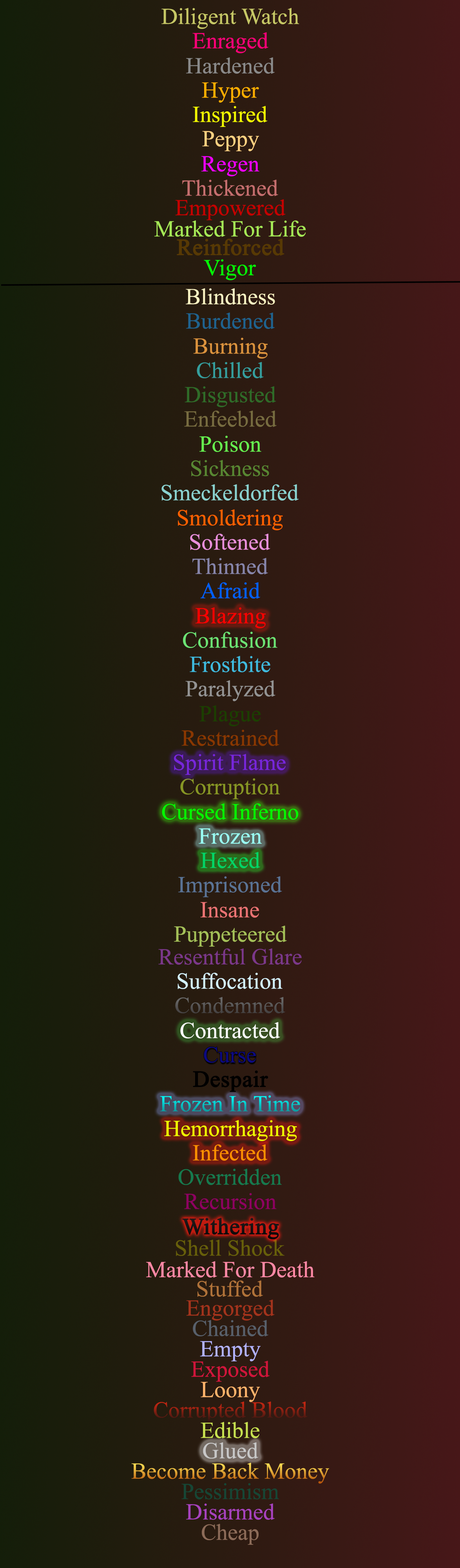
<style>
.page{position:relative;width:460px;height:1568px}
.page>*{position:absolute;margin:0}
.t1{font:39.2px "TimesNewRomanPSMT";color:#c6c765}
.t2{font:39.2px "TimesNewRomanPSMT";color:#ff0078}
.t3{font:39.2px "TimesNewRomanPSMT";color:#8a8a8a}
.t4{font:39.2px "TimesNewRomanPSMT";color:#ffae00}
.t5{font:39.2px "TimesNewRomanPSMT";color:#f3fc00}
.t6{font:39.2px "TimesNewRomanPSMT";color:#fed181}
.t7{font:39.2px "TimesNewRomanPSMT";color:#f000ff}
.t8{font:39.2px "TimesNewRomanPSMT";color:#c56e6e}
.t9{font:39.2px "TimesNewRomanPSMT";color:#c50000}
.t10{font:39.2px "TimesNewRomanPSMT";color:#a5e856}
.t11{font:39.2px "TimesNewRomanPSMT";color:#573904;font-weight:bold}
.t12{font:39.2px "TimesNewRomanPSMT";color:#00ff06}
.t13{font:39.2px "TimesNewRomanPSMT";color:#f9f2c2}
.t14{font:39.2px "TimesNewRomanPSMT";color:#1f638f}
.t15{font:39.2px "TimesNewRomanPSMT";color:#db923d}
.t16{font:39.2px "TimesNewRomanPSMT";color:#359e9d}
.t17{font:39.2px "TimesNewRomanPSMT";color:#2f6b28}
.t18{font:39.2px "TimesNewRomanPSMT";color:#776c40}
.t19{font:39.2px "TimesNewRomanPSMT";color:#66f24f}
.t20{font:39.2px "TimesNewRomanPSMT";color:#588732}
.t21{font:39.2px "TimesNewRomanPSMT";color:#8ad2cf}
.t22{font:39.2px "TimesNewRomanPSMT";color:#ff6000}
.t23{font:39.2px "TimesNewRomanPSMT";color:#e98fdb}
.t24{font:39.2px "TimesNewRomanPSMT";color:#8785aa}
.t25{font:39.2px "TimesNewRomanPSMT";color:#0060ff}
.t26{font:39.2px "TimesNewRomanPSMT";color:#ff0000}
.t27{font:39.2px "TimesNewRomanPSMT";color:#6ce374}
.t28{font:39.2px "TimesNewRomanPSMT";color:#3fbbdf}
.t29{font:39.2px "TimesNewRomanPSMT";color:#939393}
.t30{font:39.2px "TimesNewRomanPSMT";color:#1b3f00}
.t31{font:39.2px "TimesNewRomanPSMT";color:#893700}
.t32{font:39.2px "TimesNewRomanPSMT";color:#7726db}
.t33{font:39.2px "TimesNewRomanPSMT";color:#879624}
.t34{font:39.2px "TimesNewRomanPSMT";color:#00ff00}
.t35{font:39.2px "TimesNewRomanPSMT";color:#9afff4}
.t36{font:39.2px "TimesNewRomanPSMT";color:#01d565}
.t37{font:39.2px "TimesNewRomanPSMT";color:#5a7395}
.t38{font:39.2px "TimesNewRomanPSMT";color:#eb7373}
.t39{font:39.2px "TimesNewRomanPSMT";color:#a4c058}
.t40{font:39.2px "TimesNewRomanPSMT";color:#7b388a}
.t41{font:39.2px "TimesNewRomanPSMT";color:#d4f2ff}
.t42{font:39.2px "TimesNewRomanPSMT";color:#535151}
.t43{font:39.2px "TimesNewRomanPSMT";color:#ffffff}
.t44{font:39.2px "TimesNewRomanPSMT";color:#0d0a80}
.t45{font:39.2px "TimesNewRomanPSMT";color:#000000;font-weight:bold}
.t46{font:39.2px "TimesNewRomanPSMT"}
.t47{font:39.2px "TimesNewRomanPSMT";color:#f0ff00}
.t48{font:39.2px "TimesNewRomanPSMT";color:#ff9000}
.t49{font:39.2px "TimesNewRomanPSMT";color:#167a4e}
.t50{font:39.2px "TimesNewRomanPSMT";color:#8e0061}
.t51{font:39.2px "TimesNewRomanPSMT";color:#675f0a}
.t52{font:39.2px "TimesNewRomanPSMT";color:#ff88a5}
.t53{font:39.2px "TimesNewRomanPSMT";color:#b07239}
.t54{font:39.2px "TimesNewRomanPSMT";color:#a3331c}
.t55{font:39.2px "TimesNewRomanPSMT";color:#58606b}
.t56{font:39.2px "TimesNewRomanPSMT";color:#b2b2ff}
.t57{font:39.2px "TimesNewRomanPSMT";color:#d1153b}
.t58{font:39.2px "TimesNewRomanPSMT";color:#ffb36b}
.t59{font:39.2px "TimesNewRomanPSMT";color:#c7e050}
.t60{font:39.2px "TimesNewRomanPSMT";color:#c8c8c8}
.t61{font:39.2px "TimesNewRomanPSMT";color:#164635}
.t62{font:39.2px "TimesNewRomanPSMT";color:#a742be}
.t63{font:39.2px "TimesNewRomanPSMT";color:#8c6b58}
</style>
<div class="page">
<p class="t1" style="left:162px;top:8px;width:137px;height:21px">Diligent Watch</p>
<p class="t2" style="left:192px;top:32px;width:77px;height:21px">Enraged</p>
<p class="t3" style="left:186px;top:57px;width:89px;height:17px">Hardened</p>
<p class="t4" style="left:202px;top:82px;width:57px;height:21px">Hyper</p>
<p class="t5" style="left:193px;top:106px;width:75px;height:21px">Inspired</p>
<p class="t6" style="left:202px;top:131px;width:57px;height:20px">Peppy</p>
<p class="t7" style="left:201px;top:156px;width:59px;height:20px">Regen</p>
<p class="t8" style="left:182px;top:180px;width:96px;height:16px">Thickened</p>
<p class="t9" style="left:175px;top:199px;width:111px;height:21px">Empowered</p>
<p class="t10" style="left:154px;top:220px;width:152px;height:17px">Marked For Life</p>
<p class="t11" style="left:177px;top:238px;width:108px;height:18px">Reinforced</p>
<p class="t12" style="left:204px;top:259px;width:52px;height:21px">Vigor</p>
<p class="t13" style="left:186px;top:288px;width:89px;height:17px">Blindness</p>
<p class="t14" style="left:186px;top:312px;width:89px;height:17px">Burdened</p>
<p class="t15" style="left:193px;top:338px;width:75px;height:21px">Burning</p>
<p class="t16" style="left:197px;top:362px;width:67px;height:16px">Chilled</p>
<p class="t17" style="left:185px;top:386px;width:91px;height:21px">Disgusted</p>
<p class="t18" style="left:184px;top:410px;width:93px;height:17px">Enfeebled</p>
<p class="t19" style="left:200px;top:436px;width:61px;height:16px">Poison</p>
<p class="t20" style="left:191px;top:460px;width:78px;height:16px">Sickness</p>
<p class="t21" style="left:162px;top:484px;width:137px;height:17px">Smeckeldorfed</p>
<p class="t22" style="left:178px;top:509px;width:105px;height:21px">Smoldering</p>
<p class="t23" style="left:190px;top:534px;width:80px;height:16px">Softened</p>
<p class="t24" style="left:192px;top:558px;width:76px;height:16px">Thinned</p>
<p class="t25" style="left:200px;top:582px;width:60px;height:17px">Afraid</p>
<p class="t26" style="left:195px;top:607px;width:71px;height:21px">Blazing</p>
<p class="t27" style="left:183px;top:632px;width:95px;height:16px">Confusion</p>
<p class="t28" style="left:190px;top:656px;width:80px;height:16px">Frostbite</p>
<p class="t29" style="left:185px;top:680px;width:91px;height:21px">Paralyzed</p>
<p class="t30" style="left:200px;top:705px;width:61px;height:21px">Plague</p>
<p class="t31" style="left:181px;top:730px;width:98px;height:16px">Restrained</p>
<p class="t32" style="left:174px;top:754px;width:112px;height:21px">Spirit Flame</p>
<p class="t33" style="left:180px;top:778px;width:100px;height:21px">Corruption</p>
<p class="t34" style="left:162px;top:803px;width:137px;height:17px">Cursed Inferno</p>
<p class="t35" style="left:199px;top:828px;width:63px;height:16px">Frozen</p>
<p class="t36" style="left:201px;top:852px;width:59px;height:16px">Hexed</p>
<p class="t37" style="left:178px;top:876px;width:104px;height:21px">Imprisoned</p>
<p class="t38" style="left:200px;top:902px;width:59px;height:16px">Insane</p>
<p class="t39" style="left:174px;top:926px;width:113px;height:21px">Puppeteered</p>
<p class="t40" style="left:158px;top:948px;width:144px;height:17px">Resentful Glare</p>
<p class="t41" style="left:178px;top:973px;width:105px;height:16px">Suffocation</p>
<p class="t42" style="left:175px;top:997px;width:110px;height:16px">Condemned</p>
<p class="t43" style="left:180px;top:1022px;width:100px;height:16px">Contracted</p>
<p class="t44" style="left:204px;top:1047px;width:52px;height:16px">Curse</p>
<p class="t45" style="left:193px;top:1070px;width:76px;height:22px">Despair</p>
<p class="t46" style="left:160px;top:1095px;width:140px;height:17px">Frozen In Time</p>
<p class="t47" style="left:164px;top:1120px;width:133px;height:21px">Hemorrhaging</p>
<p class="t48" style="left:193px;top:1144px;width:75px;height:17px">Infected</p>
<p class="t49" style="left:178px;top:1169px;width:104px;height:16px">Overridden</p>
<p class="t50" style="left:184px;top:1193px;width:93px;height:16px">Recursion</p>
<p class="t45" style="left:182px;top:1218px;width:97px;height:22px">Withering</p>
<p class="t51" style="left:176px;top:1240px;width:109px;height:16px">Shell Shock</p>
<p class="t52" style="left:146px;top:1261px;width:169px;height:17px">Marked For Death</p>
<p class="t53" style="left:197px;top:1280px;width:66px;height:17px">Stuffed</p>
<p class="t54" style="left:186px;top:1299px;width:89px;height:22px">Engorged</p>
<p class="t55" style="left:193px;top:1320px;width:76px;height:16px">Chained</p>
<p class="t56" style="left:200px;top:1341px;width:61px;height:20px">Empty</p>
<p class="t57" style="left:191px;top:1361px;width:79px;height:21px">Exposed</p>
<p class="t58" style="left:201px;top:1382px;width:59px;height:20px">Loony</p>
<p class="t46" style="left:154px;top:1401px;width:154px;height:22px">Corrupted Blood</p>
<p class="t59" style="left:201px;top:1422px;width:59px;height:16px">Edible</p>
<p class="t60" style="left:203px;top:1442px;width:55px;height:17px">Glued</p>
<p class="t46" style="left:131px;top:1463px;width:198px;height:21px">Become Back Money</p>
<p class="t61" style="left:181px;top:1483px;width:98px;height:16px">Pessimism</p>
<p class="t62" style="left:186px;top:1503px;width:89px;height:17px">Disarmed</p>
<p class="t63" style="left:202px;top:1524px;width:57px;height:21px">Cheap</p>
</div>
